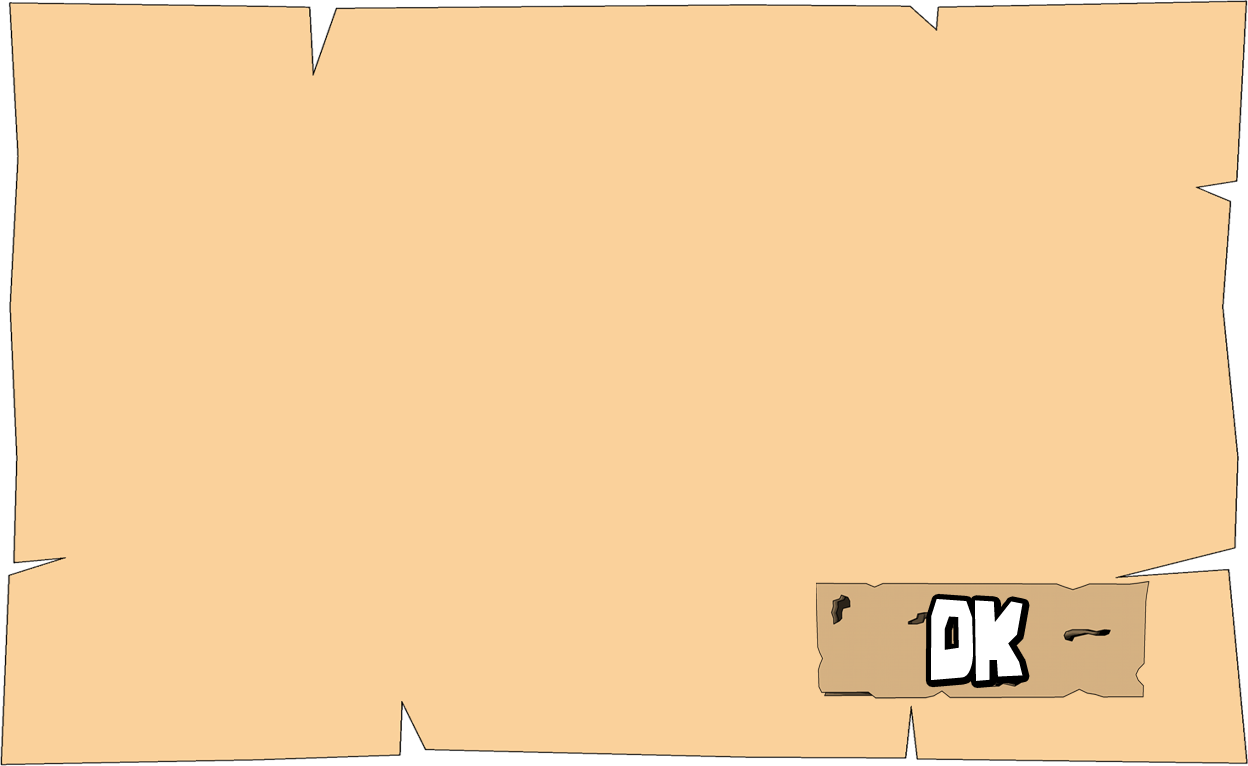
<style>
.page{position:relative;width:1248px;height:766px;background:#fad19b}
.page>*{position:absolute;margin:0}
.t1{font:100px "Eastwood";color:#ffffff}
</style>
<div class="page">
<p class="t1" style="left:931px;top:599px;width:92px;height:82px">OK</p>
</div>
